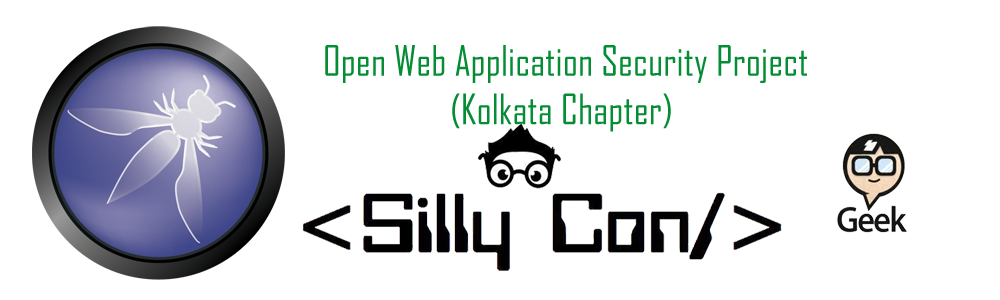
<style>
.page{position:relative;width:1000px;height:300px;background:#ffffff}
.page>*{position:absolute;margin:0}
.t1{font:40.3px "AgencyFB-Reg";color:#048d35}
.t2{font:33.3px "BodoniMT";color:#393e57}
</style>
<div class="page">
<p class="t1" style="left:325px;top:45px;width:482px;height:87px;text-align:center"><span class="t2"> </span>Open Web Application Security Project<br>(Kolkata Chapter)</p>
</div>
